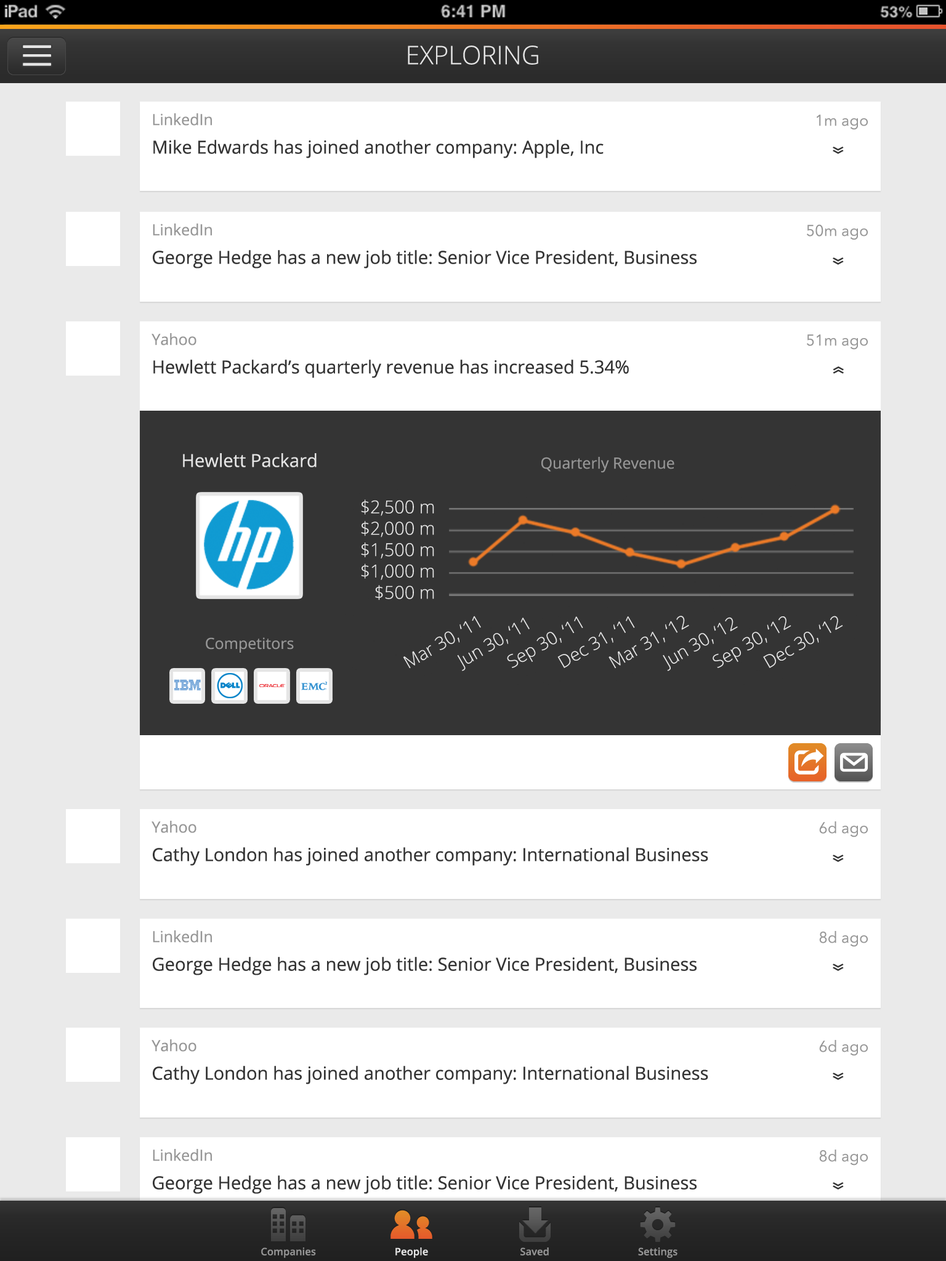
<style>
.page{position:relative;width:946px;height:1261px;background:#ffffff}
.page>*{position:absolute;margin:0}
.t1{font:25.7px "OpenSans-Light";color:#e5e5e5}
.t2{font:18px "OpenSans";color:#343434}
.t3{font:15.4px "OpenSans";color:#969696}
.t4{font:15.4px "AvenirNext-Regular";color:#969696}
.t5{font:25.7px "OpenSans";color:#343434;scale:0.64 1}
.t6{font:18px "OpenSans";color:#e5e5e5}
.t7{font:17.8px "OpenSans-Light";color:#e5e5e5}
.t8{font:10.3px "OpenSans-Semibold";color:#969696}
.t9{font:10.3px "OpenSans-Semibold";color:#e5e5e5}
</style>
<div class="page">
<p class="t1" style="left:408px;top:46px;width:130px;height:19px">EXPLORING</p>
<p class="t2" style="left:153px;top:113px;width:450px;height:45px"><span class="t3">LinkedIn<br></span>Mike Edwards has joined another company: Apple, Inc</p>
<p class="t4" style="left:816px;top:115px;width:51px;height:15px">1m ago</p>
<p class="t5" style="left:832px;top:147px;width:11px;height:7px;rotate:90deg">»</p>
<p class="t2" style="left:153px;top:223px;width:543px;height:45px"><span class="t3">LinkedIn<br></span>George Hedge has a new job title: Senior Vice President, Business Development</p>
<p class="t4" style="left:807px;top:224px;width:60px;height:16px">50m ago</p>
<p class="t5" style="left:832px;top:257px;width:11px;height:8px;rotate:90deg">»</p>
<p class="t2" style="left:151px;top:333px;width:478px;height:45px"><span class="t3">Yahoo<br></span>Hewlett Packard’s quarterly revenue has increased 5.34%</p>
<p class="t4" style="left:807px;top:334px;width:60px;height:16px">51m ago</p>
<p class="t5" style="left:832px;top:366px;width:11px;height:8px;rotate:-90deg">»</p>
<p class="t6" style="left:183px;top:453px;width:133px;height:14px">Hewlett Packard</p>
<p class="t3" style="left:541px;top:457px;width:133px;height:16px">Quarterly Revenue</p>
<p class="t7" style="left:361px;top:499px;width:73px;height:101px;text-align:right">$2,500 m<br>$2,000 m<br>$1,500 m<br>$1,000 m<br>$500 m</p>
<p class="t7" style="left:403px;top:616px;width:78px;height:53px;rotate:-30deg">Mar 30, ‘11</p>
<p class="t7" style="left:457px;top:618px;width:72px;height:53px;rotate:-30deg">Jun 30, ‘11</p>
<p class="t7" style="left:507px;top:616px;width:76px;height:52px;rotate:-30deg">Sep 30, ‘11</p>
<p class="t7" style="left:557px;top:616px;width:78px;height:52px;rotate:-30deg">Dec 31, ‘11</p>
<p class="t7" style="left:608px;top:616px;width:81px;height:53px;rotate:-30deg">Mar 31, ‘12</p>
<p class="t7" style="left:662px;top:617px;width:76px;height:54px;rotate:-30deg">Jun 30, ‘12</p>
<p class="t7" style="left:712px;top:616px;width:79px;height:52px;rotate:-30deg">Sep 30, ‘12</p>
<p class="t7" style="left:763px;top:616px;width:80px;height:52px;rotate:-30deg">Dec 30, ‘12</p>
<p class="t3" style="left:206px;top:637px;width:88px;height:16px">Competitors</p>
<p class="t2" style="left:151px;top:821px;width:557px;height:45px"><span class="t3">Yahoo<br></span>Cathy London has joined another company: International Business Machines</p>
<p class="t4" style="left:819px;top:821px;width:48px;height:16px">6d ago</p>
<p class="t5" style="left:832px;top:855px;width:11px;height:7px;rotate:90deg">»</p>
<p class="t2" style="left:153px;top:930px;width:543px;height:45px"><span class="t3">LinkedIn<br></span>George Hedge has a new job title: Senior Vice President, Business</p>
<p class="t4" style="left:819px;top:931px;width:48px;height:16px">8d ago</p>
<p class="t5" style="left:832px;top:964px;width:11px;height:7px;rotate:90deg">»</p>
<p class="t2" style="left:151px;top:1039px;width:557px;height:45px"><span class="t3">Yahoo<br></span>Cathy London has joined another company: International Business Machines</p>
<p class="t4" style="left:819px;top:1040px;width:48px;height:16px">6d ago</p>
<p class="t5" style="left:832px;top:1073px;width:11px;height:7px;rotate:90deg">»</p>
<p class="t2" style="left:153px;top:1149px;width:543px;height:45px"><span class="t3">LinkedIn<br></span>George Hedge has a new job title: Senior Vice President, Business</p>
<p class="t4" style="left:819px;top:1149px;width:48px;height:16px">8d ago</p>
<p class="t5" style="left:832px;top:1182px;width:11px;height:7px;rotate:90deg">»</p>
<p class="t8" style="left:261px;top:1247px;width:55px;height:11px">Companies</p>
<p class="t9" style="left:395px;top:1247px;width:33px;height:11px">People</p>
<p class="t8" style="left:520px;top:1247px;width:29px;height:8px">Saved</p>
<p class="t8" style="left:638px;top:1247px;width:39px;height:11px">Settings</p>
</div>
